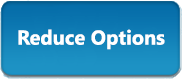
<style>
.page{position:relative;width:182px;height:79px}
.page>*{position:absolute;margin:0}
.t1{font:20.1px "NirmalaUI-Bold";color:#ffffff}
</style>
<div class="page">
<p class="t1" style="left:18px;top:29px;width:147px;height:21px">Reduce Options</p>
<p class="t1" style="left:18px;top:29px;width:147px;height:21px">Reduce Options</p>
</div>
